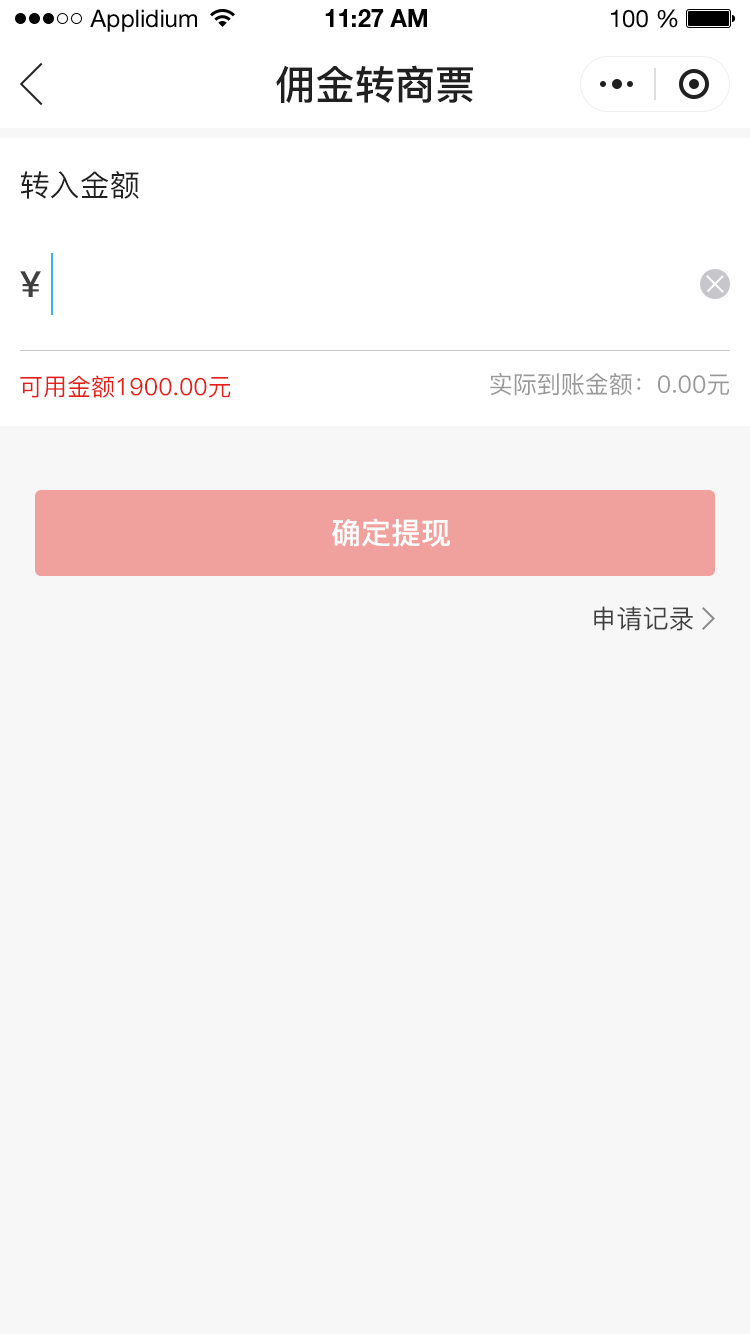
<style>
.page{position:relative;width:750px;height:1334px;background:#f7f7f7}
.page>*{position:absolute;margin:0}
.t1{font:24px "HelveticaNeueLTStd-Roman";color:#000000}
.t2{font:24px "HelveticaNeueLTStd-Bd";color:#000000}
.t3{font:40px "PingFang-SC-Bold";color:#202020;text-transform:uppercase}
.t4{font:30px "PingFang-SC-Medium";color:#202020;text-transform:uppercase}
.t5{font:36px "PingFang-SC-Bold";color:#404040;text-transform:uppercase}
.t6{font:24px "PingFang-SC-Medium";color:#e61f18;text-transform:uppercase}
.t7{font:24px "PingFang-SC-Medium";color:#999999;text-transform:uppercase}
.t8{font:30px "PingFang-SC-Bold";color:#ffffff;text-transform:uppercase}
.t9{font:26px "PingFang-SC-Medium";color:#404040;text-transform:uppercase}
</style>
<div class="page">
<p class="t1" style="left:90px;top:9px;width:107px;height:23px">Applidium</p>
<p class="t2" style="left:325px;top:9px;width:102px;height:18px">11:27 AM</p>
<p class="t1" style="left:611px;top:9px;width:67px;height:19px">100 %</p>
<p class="t3" style="left:276px;top:65px;width:197px;height:38px">佣金转商票</p>
<p class="t4" style="left:21px;top:171px;width:118px;height:28px">转入金额</p>
<p class="t5" style="left:20px;top:271px;width:21px;height:26px">¥</p>
<p class="t6" style="left:20px;top:375px;width:211px;height:23px">可用金额1900.00元</p>
<p class="t7" style="left:490px;top:373px;width:239px;height:23px">实际到账金额：0.00元</p>
<p class="t8" style="left:332px;top:518px;width:118px;height:29px">确定提现</p>
<p class="t9" style="left:594px;top:606px;width:99px;height:25px">申请记录</p>
</div>
